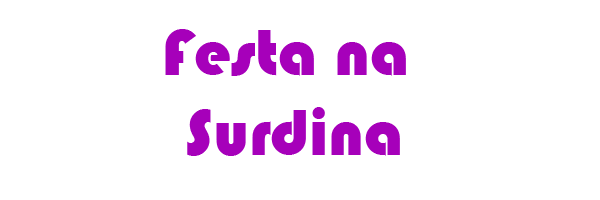
<style>
.page{position:relative;width:600px;height:200px;background:#ffffff}
.page>*{position:absolute;margin:0}
.t1{font:66.7px "Bauhaus93";color:#a600ba}
</style>
<div class="page">
<p class="t1" style="left:165px;top:29px;width:241px;height:127px;text-align:center">Festa na <br>Surdina</p>
</div>
